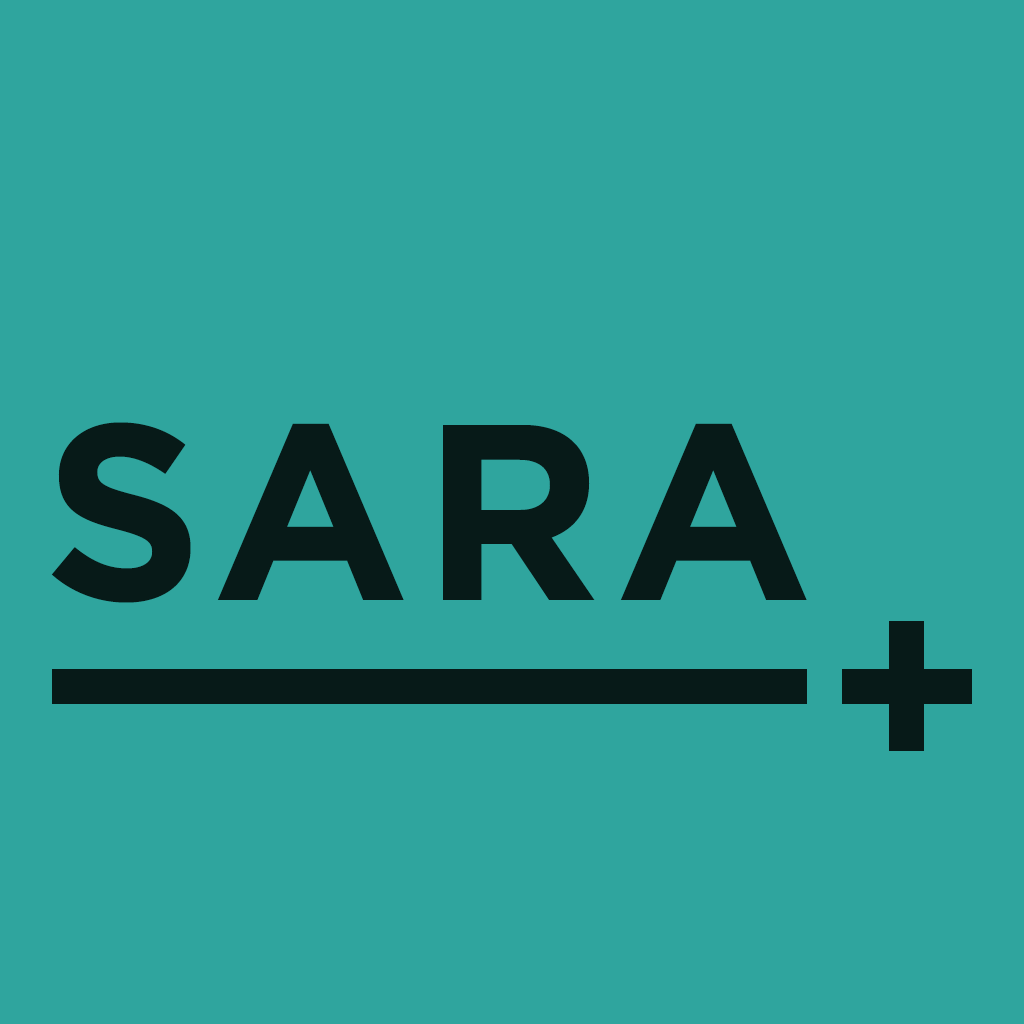
<style>
.page{position:relative;width:1024px;height:1024px;background:#2fa59e}
.page>*{position:absolute;margin:0}
.t1{font:250px "Gotham-Bold";letter-spacing:0.05em;color:#071a18;text-transform:uppercase}
</style>
<div class="page">
<p class="t1" style="left:51px;top:422px;width:756px;height:181px">SARA</p>
</div>
